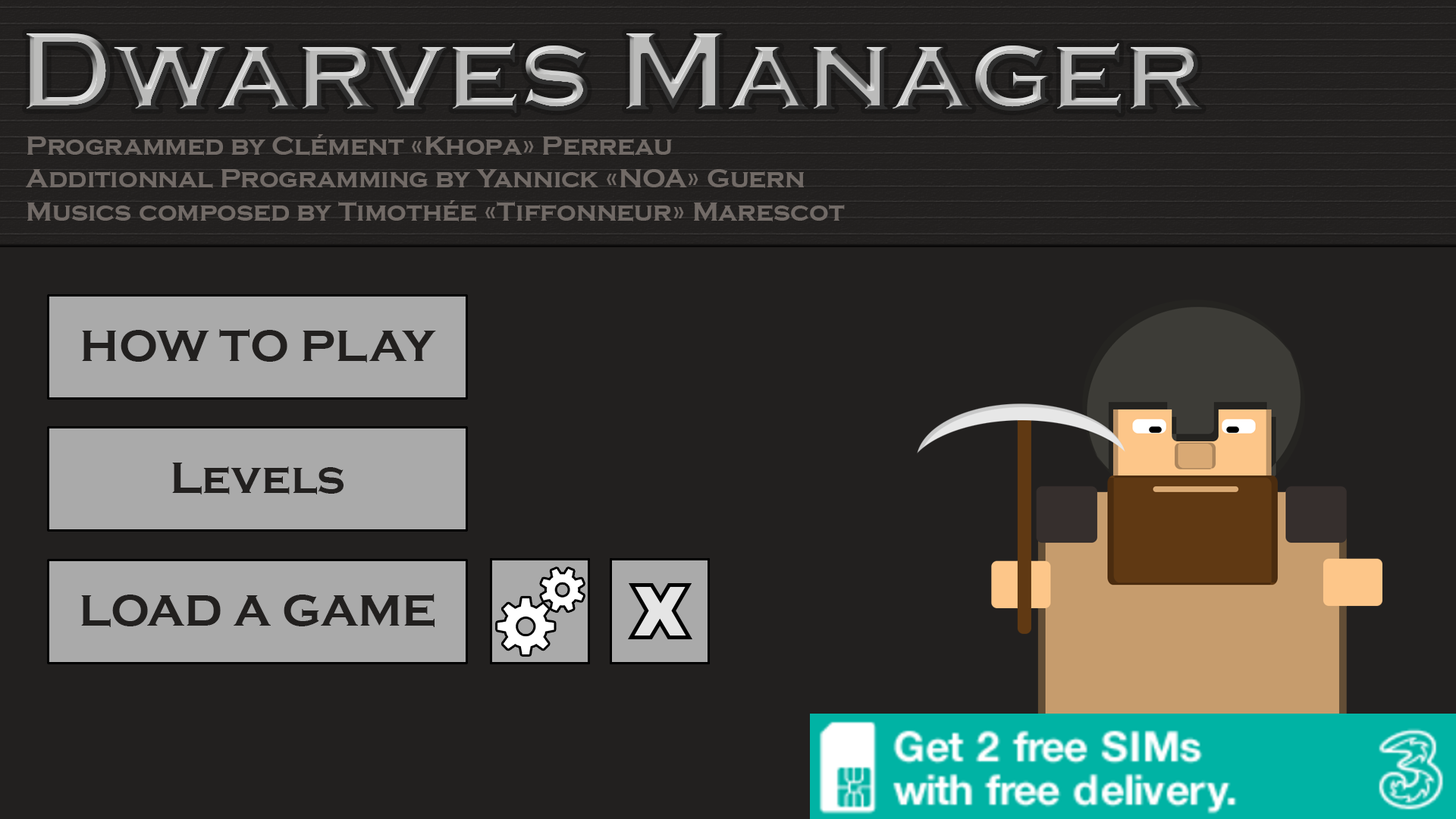
<style>
.page{position:relative;width:1456px;height:819px;background:#22201f}
.page>*{position:absolute;margin:0}
.t1{font:113.7px "CopperplateGothic-Bold"}
.t2{font:27.3px "CopperplateGothic-Bold";color:#716a66}
.t3{font:45.5px "CopperplateGothic-Bold";color:#22201f}
.t4{font:45.6px "CopperplateGothic-Bold";color:#22201f}
</style>
<div class="page">
<p class="t1" style="left:27px;top:33px;width:1175px;height:80px">Dwarves Manager</p>
<p class="t2" style="left:26px;top:134px;width:819px;height:87px">Programmed by Clément «Khopa» Perreau<br>Additionnal Programming by Yannick «NOA» Guern<br>Musics composed by Timothée «Tiffonneur» Marescot</p>
<p class="t3" style="left:82px;top:329px;width:354px;height:33px">HOW TO PLAY</p>
<p class="t4" style="left:172px;top:463px;width:172px;height:31px">Levels</p>
<p class="t4" style="left:81px;top:594px;width:354px;height:33px">LOAD A GAME</p>
</div>
